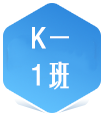
<style>
.page{position:relative;width:102px;height:114px;background:#ffffff}
.page>*{position:absolute;margin:0}
.t1{font:28px/37px "FZYTK--GBK1-0";letter-spacing:-0.02em;color:#ffffff;text-transform:uppercase;font-weight:bold}
</style>
<div class="page">
<p class="t1" style="left:32px;top:27px;width:37px;height:63px;text-align:center">K一<br>1班</p>
</div>
